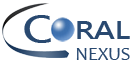
<style>
.page{position:relative;width:133px;height:62px;background:#ffffff}
.page>*{position:absolute;margin:0}
.t1{font:36px "MicrosoftJhengHeiBold";letter-spacing:-0.02em;color:#294970;scale:1.24 1}
.t2{font:24px "MicrosoftJhengHeiBold";letter-spacing:-0.02em;color:#294970;scale:1.24 1}
.t3{font:18.7px "Candara";color:#294970}
</style>
<div class="page">
<p class="t1" style="left:24px;top:15px;width:27px;height:28px">C</p>
<p class="t2" style="left:77px;top:21px;width:53px;height:18px">RAL</p>
<p class="t3" style="left:76px;top:48px;width:54px;height:12px">NEXUS</p>
</div>
